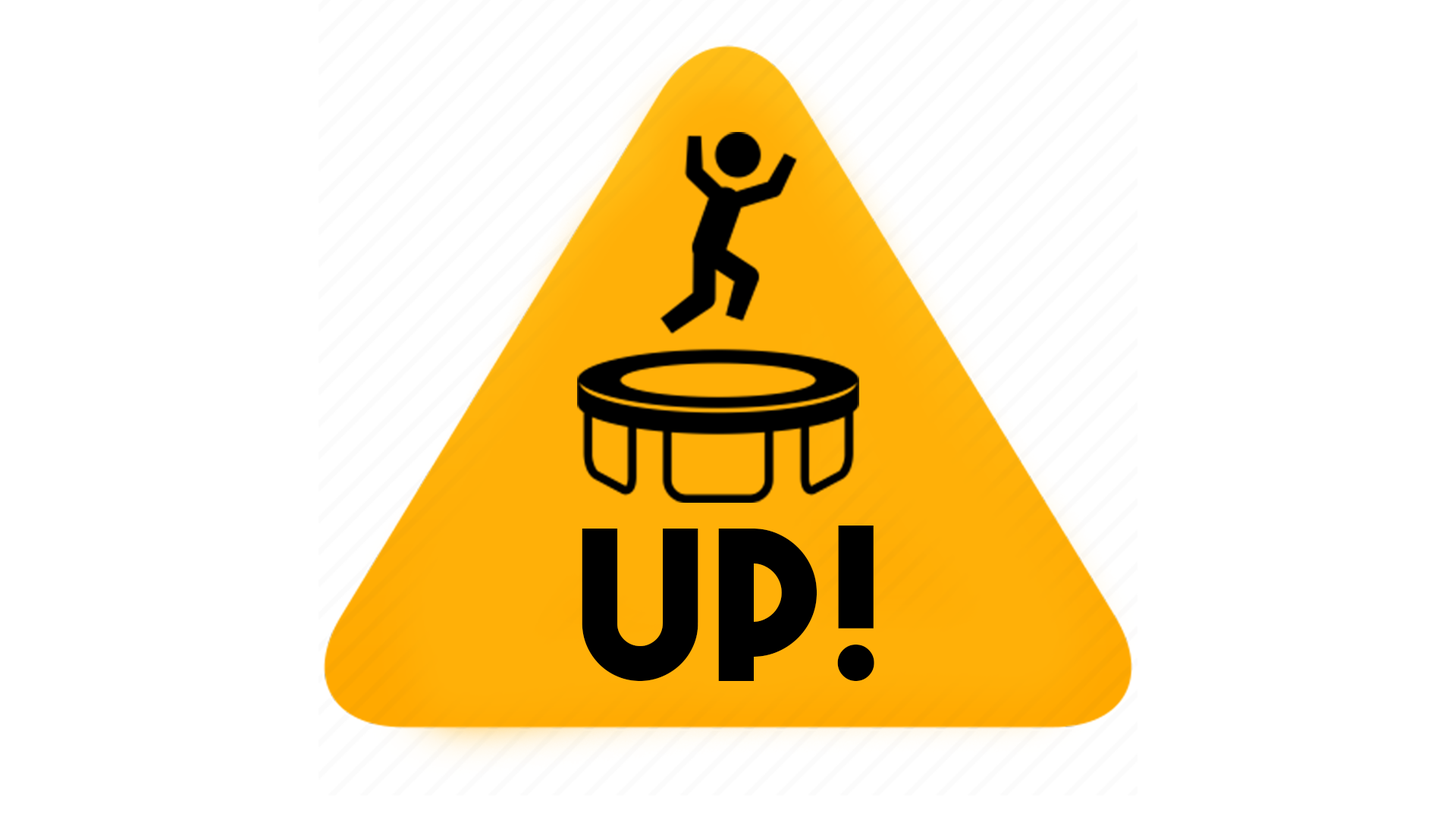
<style>
.page{position:relative;width:1456px;height:819px;background:#ffffff}
.page>*{position:absolute;margin:0}
.t1{font:208px "TheBoldFont";color:#000000}
</style>
<div class="page">
<p class="t1" style="left:582px;top:526px;width:292px;height:155px">UP!</p>
</div>
